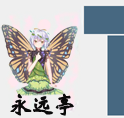
<style>
.page{position:relative;width:124px;height:118px;background:#efefef}
.page>*{position:absolute;margin:0}
.t1{font:23.6px "STXinwei";letter-spacing:0.01em;color:#0a0a0a;font-weight:bold;scale:0.95 1}
</style>
<div class="page">
<p class="t1" style="left:10px;top:93px;width:64px;height:23px">永远亭</p>
</div>
